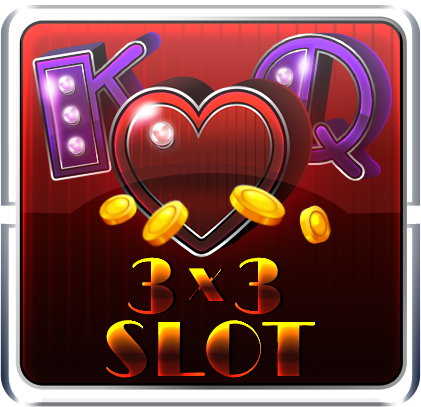
<style>
.page{position:relative;width:421px;height:407px}
.page>*{position:absolute;margin:0}
.t1{font:80px "Broadway";text-transform:uppercase;font-weight:bold}
.t2{font:48px "Broadway";text-transform:uppercase;font-weight:bold}
</style>
<div class="page">
<p class="t1" style="left:128px;top:257px;width:49px;height:58px">3</p>
<p class="t1" style="left:235px;top:257px;width:49px;height:58px">3</p>
<p class="t2" style="left:189px;top:268px;width:38px;height:34px">x</p>
<p class="t1" style="left:106px;top:320px;width:212px;height:58px">slot</p>
</div>
